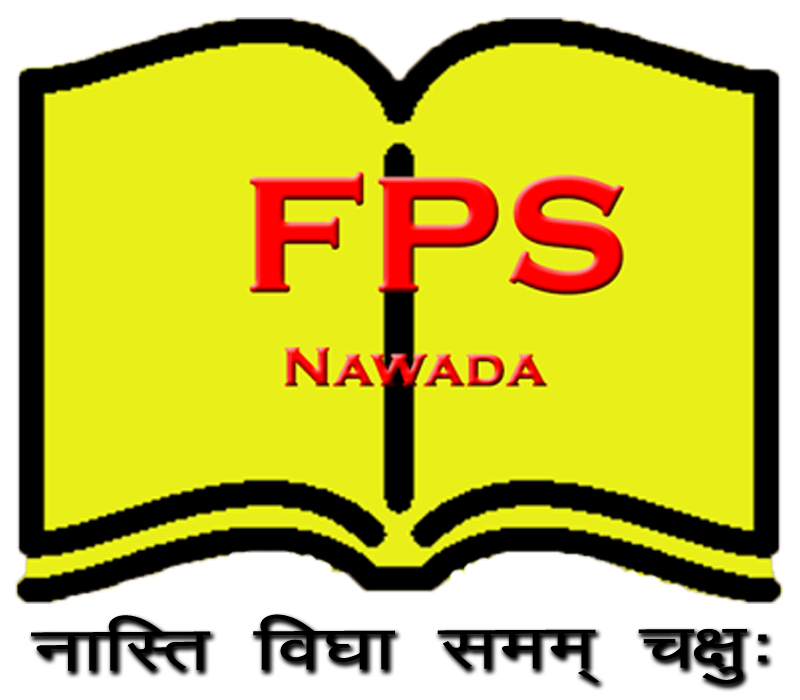
<style>
.page{position:relative;width:800px;height:700px;background:#e9f019}
.page>*{position:absolute;margin:0}
.t1{font:78.8px "ShreenathBold";color:#000000;scale:1.37 1}
</style>
<div class="page">
<p class="t1" style="left:31px;top:614px;width:736px;height:70px">gfl:t lj3f ;dd\ rIf'M</p>
</div>
